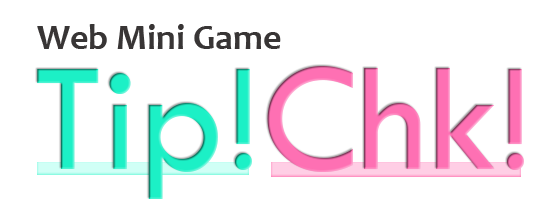
<style>
.page{position:relative;width:560px;height:211px;background:#ffffff}
.page>*{position:absolute;margin:0}
.t1{font:36px "Candara-Bold";color:#383535}
.t2{font:160px "TwCenMT-Regular";color:#1cf0c6}
.t3{font:160px "TwCenMT-Regular";color:#fe70b3}
</style>
<div class="page">
<p class="t1" style="left:37px;top:24px;width:244px;height:25px">Web Mini Game</p>
<p class="t2" style="left:37px;top:66px;width:487px;height:133px">Tip!<span class="t3">Chk!</span></p>
</div>
